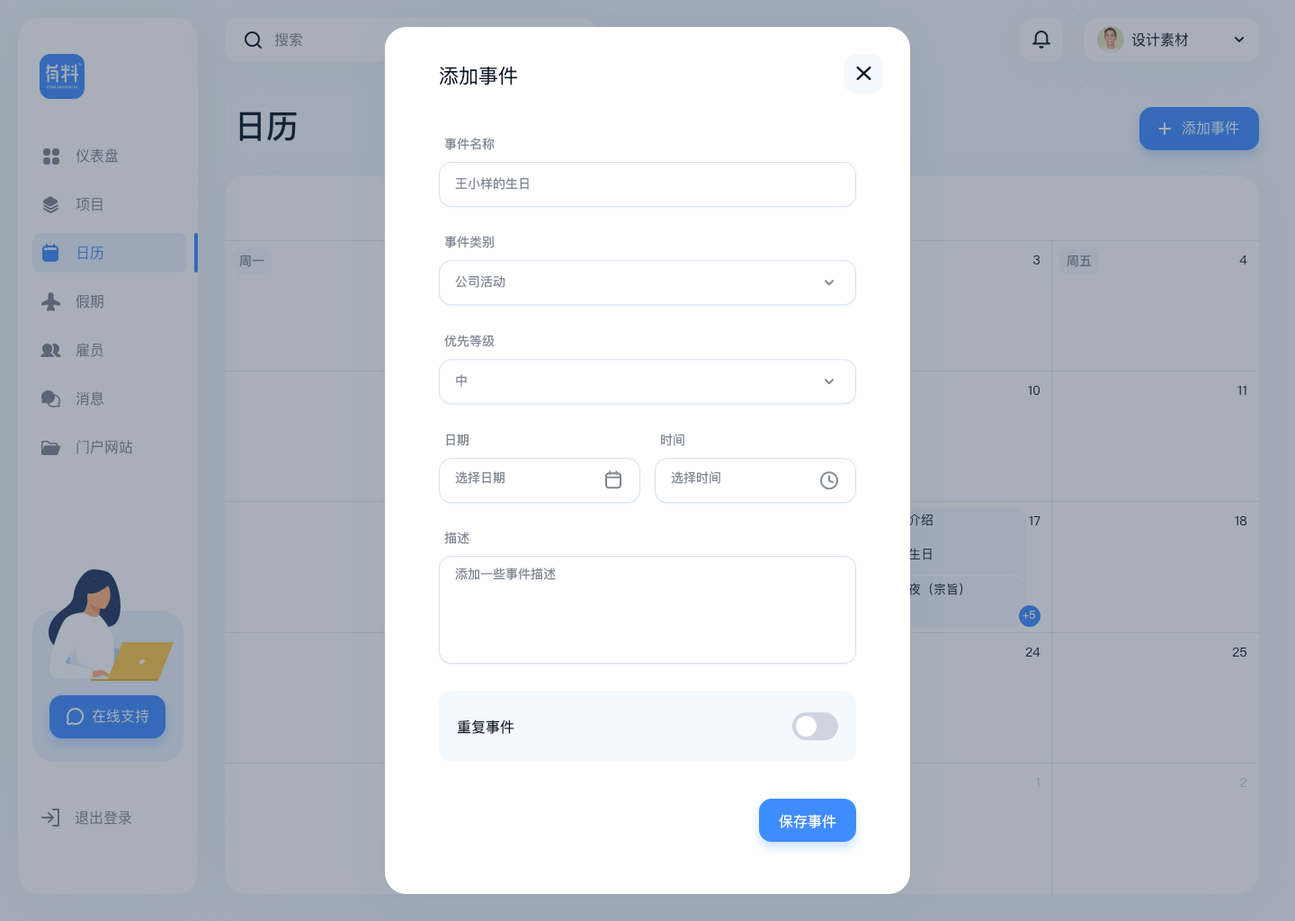
<style>
.page{position:relative;width:1295px;height:921px;background:#a8afb8}
.page>*{position:absolute;margin:0}
.t1{font:19.8px "PingFangSC-Regular";color:#0a1629}
.t2{font:12.6px "PingFangSC-Regular";color:#7d8592}
.t3{font:14.4px "PingFangSC-Regular";color:#0a1629}
.t4{font:14.4px "PingFangSC-Regular";color:#ffffff}
</style>
<div class="page">
<p class="t1" style="left:440px;top:66px;width:78px;height:19px">添加事件</p>
<p class="t2" style="left:444px;top:138px;width:51px;height:12px">事件名称</p>
<p class="t2" style="left:455px;top:177px;width:74px;height:13px">王小样的生日</p>
<p class="t2" style="left:444px;top:236px;width:50px;height:12px">事件类别</p>
<p class="t2" style="left:455px;top:275px;width:50px;height:13px">公司活动</p>
<p class="t2" style="left:444px;top:335px;width:51px;height:12px">优先等级</p>
<p class="t2" style="left:456px;top:374px;width:11px;height:13px">中</p>
<p class="t2" style="left:446px;top:433px;width:23px;height:13px">日期</p>
<p class="t2" style="left:661px;top:433px;width:23px;height:13px">时间</p>
<p class="t2" style="left:455px;top:471px;width:49px;height:13px">选择日期</p>
<p class="t2" style="left:671px;top:471px;width:49px;height:13px">选择时间</p>
<p class="t2" style="left:444px;top:531px;width:25px;height:13px">描述</p>
<p class="t2" style="left:455px;top:567px;width:101px;height:13px">添加一些事件描述</p>
<p class="t3" style="left:457px;top:719px;width:57px;height:15px">重复事件</p>
<p class="t4" style="left:779px;top:814px;width:57px;height:14px">保存事件</p>
</div>
